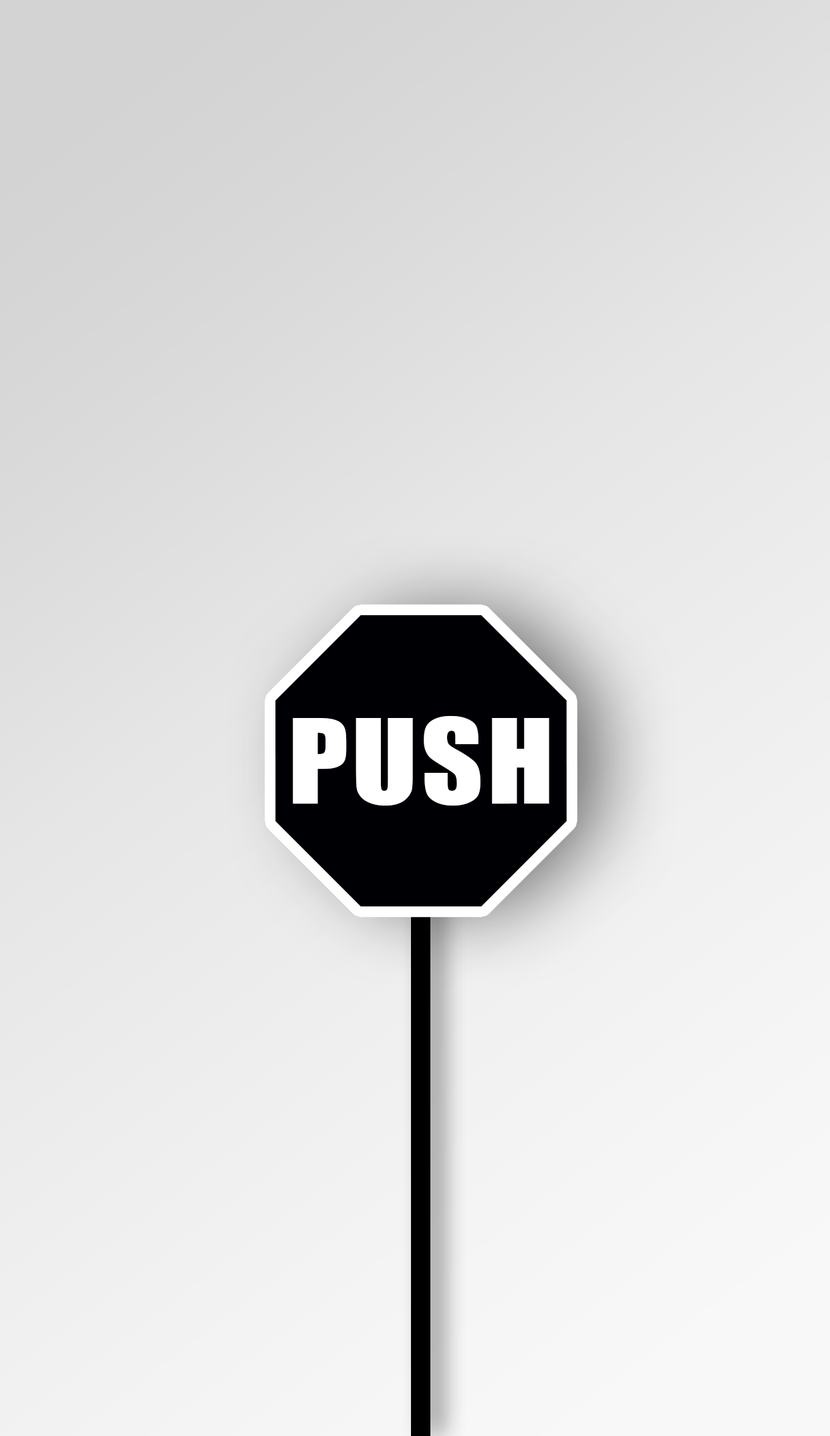
<style>
.page{position:relative;width:830px;height:1436px}
.page>*{position:absolute;margin:0}
.t1{font:108.3px "Impact";letter-spacing:0.03em;color:#ffffff;scale:1.11 1}
</style>
<div class="page">
<p class="t1" style="left:293px;top:716px;width:257px;height:90px">PUSH</p>
</div>
